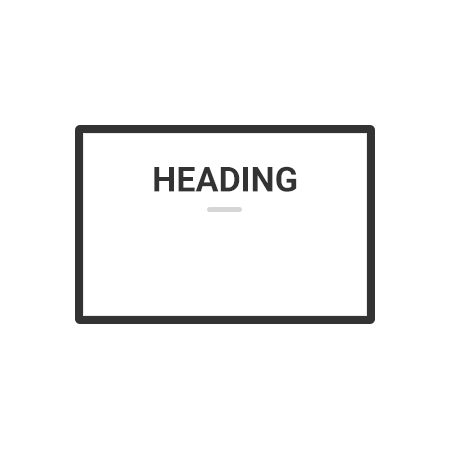
<style>
.page{position:relative;width:450px;height:450px;background:#ffffff}
.page>*{position:absolute;margin:0}
.t1{font:34.6px "Roboto-Bold";color:#333333}
</style>
<div class="page">
<p class="t1" style="left:154px;top:166px;width:143px;height:26px">HEADING</p>
</div>
